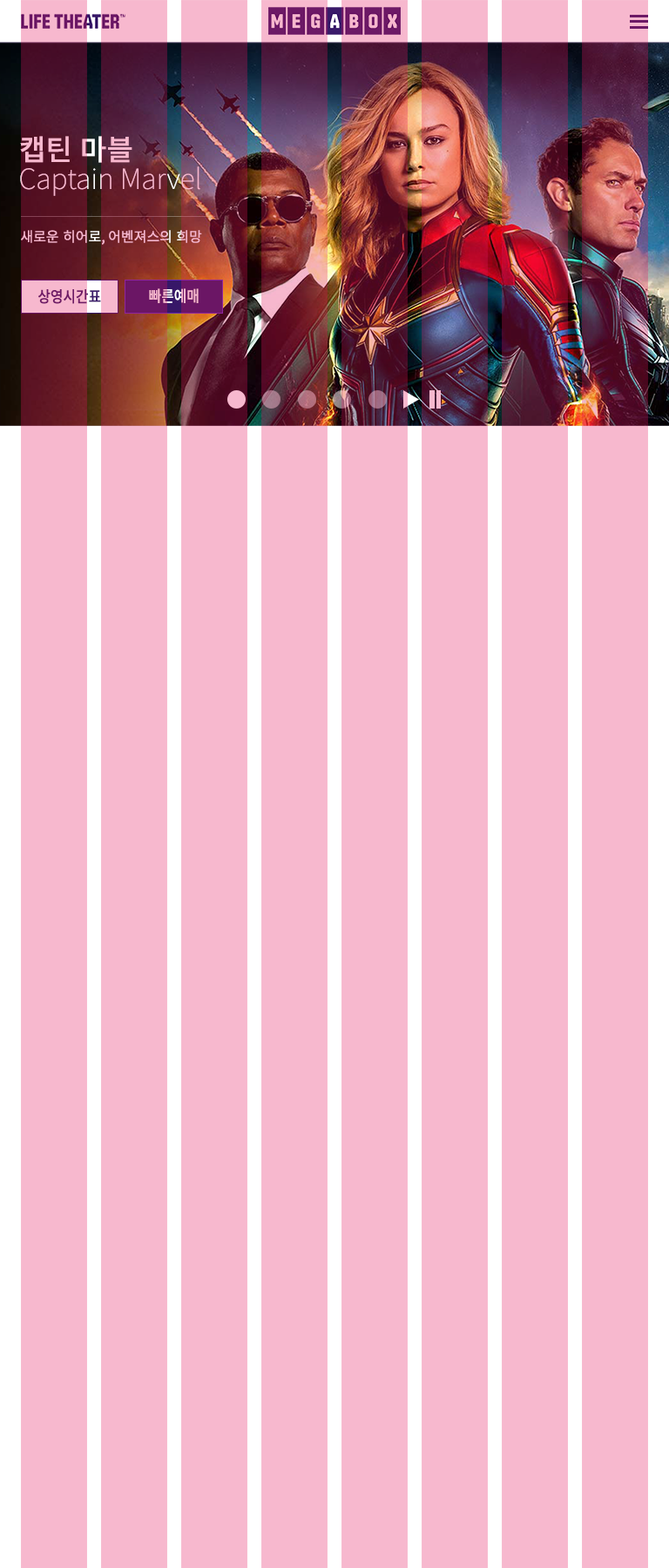
<style>
.page{position:relative;width:669px;height:1568px;background:#f7b8ce}
.page>*{position:absolute;margin:0}
.t1{font:28.7px "NotoSansCJKkr-Medium";color:#f7b8ce}
.t2{font:27.9px "NotoSansCJKkr-Thin";color:#f7b8ce}
.t3{font:13.9px "NotoSansCJKkr-Regular";color:#f7b8ce}
.t4{font:15.7px "NotoSansCJKkr-Medium";color:#6e1a67;scale:0.88 1}
.t5{font:15.7px "NotoSansCJKkr-Medium";color:#f7b8ce;scale:0.88 1}
</style>
<div class="page">
<p class="t1" style="left:20px;top:136px;width:112px;height:27px">캡틴 마블</p>
<p class="t2" style="left:20px;top:166px;width:180px;height:30px">Captain Marvel</p>
<p class="t3" style="left:21px;top:230px;width:181px;height:15px">새로운 히어로, 어벤져스의 희망</p>
<p class="t4" style="left:38px;top:289px;width:63px;height:15px">상영시간표</p>
<p class="t5" style="left:149px;top:288px;width:50px;height:15px">빠른예매</p>
</div>
